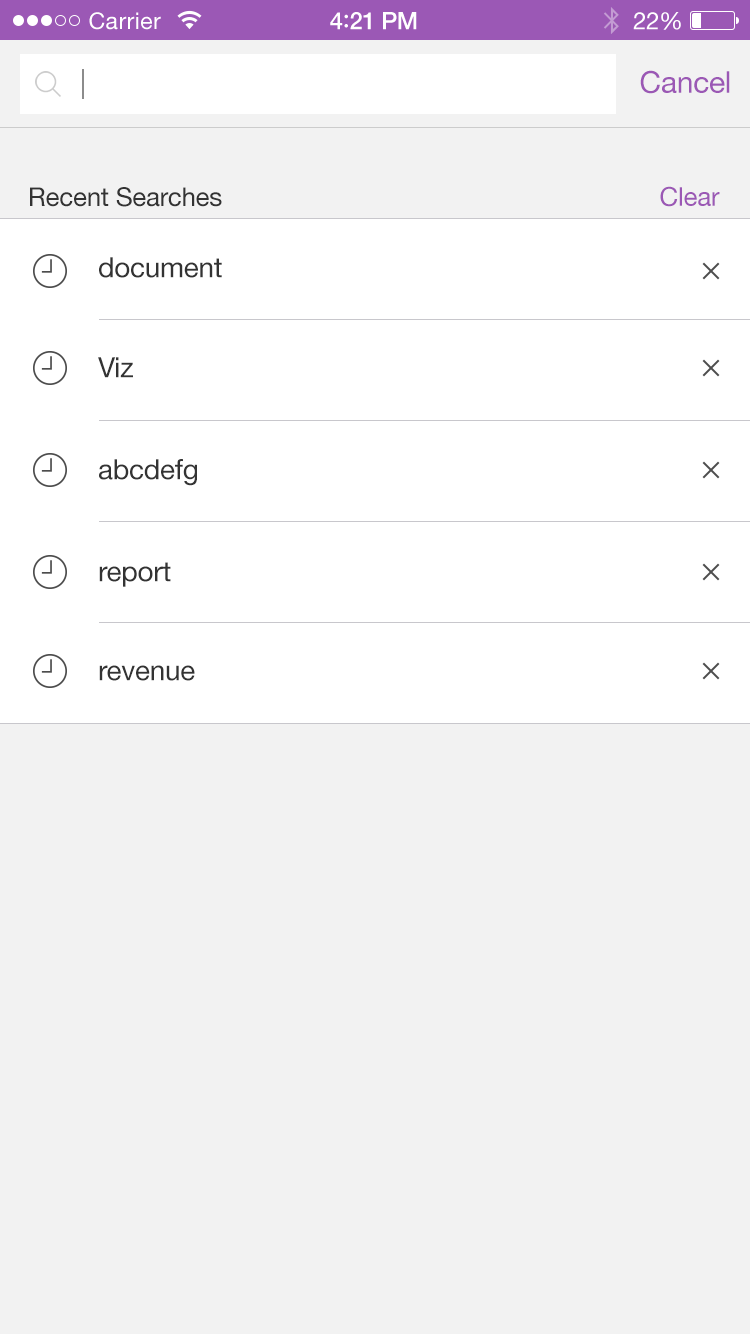
<style>
.page{position:relative;width:750px;height:1334px;background:#f2f2f2}
.page>*{position:absolute;margin:0}
.t1{font:23px "HelveticaNeue";letter-spacing:0.02em;color:#ffffff}
.t2{font:24px "HelveticaNeue-Medium";letter-spacing:-0.02em;color:#ffffff}
.t3{font:26px "Avenir-Medium";letter-spacing:-0.02em;color:#ffffff}
.t4{font:24px "HelveticaNeue";letter-spacing:-0.02em;color:#ffffff}
.t5{font:30px "HelveticaNeue";letter-spacing:-0.01em;color:#9b58b5}
.t6{font:26px "HelveticaNeue";letter-spacing:-0.01em;color:#333333}
.t7{font:26px "HelveticaNeue";letter-spacing:-0.01em;color:#9b58b5}
.t8{font:28px "HelveticaNeue";letter-spacing:-0.01em;color:#333333}
</style>
<div class="page">
<p class="t1" style="left:89px;top:12px;width:72px;height:18px">Carrier</p>
<p class="t2" style="left:330px;top:12px;width:87px;height:18px">4<span class="t3">:</span>21 PM</p>
<p class="t4" style="left:633px;top:12px;width:48px;height:18px">22%</p>
<p class="t5" style="left:640px;top:70px;width:90px;height:24px">Cancel</p>
<p class="t6" style="left:30px;top:187px;width:192px;height:20px">Recent Searches</p>
<p class="t7" style="left:660px;top:186px;width:60px;height:21px">Clear</p>
<p class="t8" style="left:99px;top:257px;width:123px;height:21px">document</p>
<p class="t8" style="left:98px;top:357px;width:35px;height:21px">Viz</p>
<p class="t8" style="left:99px;top:459px;width:98px;height:27px">abcdefg</p>
<p class="t8" style="left:99px;top:562px;width:72px;height:25px">report</p>
<p class="t8" style="left:99px;top:665px;width:96px;height:16px">revenue</p>
</div>
